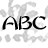
<style>
.page{position:relative;width:48px;height:48px;background:#ffffff}
.page>*{position:absolute;margin:0}
.t1{font:16px "ChowFun";color:#000000}
</style>
<div class="page">
<p class="t1" style="left:2px;top:16px;width:45px;height:14px">ABC</p>
</div>
